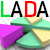
<style>
.page{position:relative;width:50px;height:50px}
.page>*{position:absolute;margin:0}
.t1{font:22.1px "SommetBold";color:#00dd2f;scale:0.95 1}
.t2{font:22.1px "SommetBold";color:#000000;scale:0.95 1}
.t3{font:22.1px "SommetBold";color:#ff0000;scale:0.95 1}
</style>
<div class="page">
<p class="t1" style="left:1px;top:1px;width:48px;height:16px">L<span class="t2">A</span><span class="t3">D</span><span class="t2">A</span></p>
</div>
